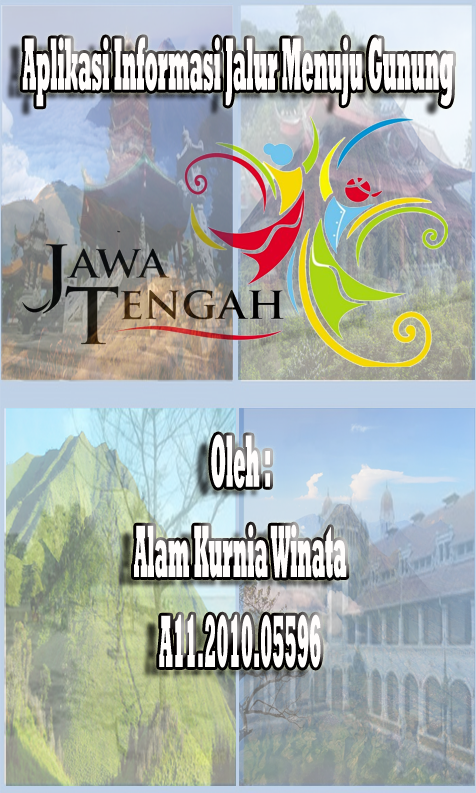
<style>
.page{position:relative;width:476px;height:793px}
.page>*{position:absolute;margin:0}
.t1{font:75.1px "Rockwell-ExtraBold";color:#fffdfc;scale:0.24 1}
</style>
<div class="page">
<p class="t1" style="left:22px;top:37px;width:431px;height:70px">Aplikasi Informasi Jalur Menuju Gunung</p>
<p class="t1" style="left:134px;top:434px;width:213px;height:234px;text-align:center">Oleh :<br>Alam Kurnia Winata<br>A11.2010.05596</p>
</div>
